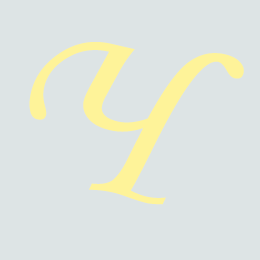
<style>
.page{position:relative;width:260px;height:260px;background:#dde4e5}
.page>*{position:absolute;margin:0}
.t1{font:250px "MonotypeCorsiva";letter-spacing:0.1em;color:#fef399;text-transform:uppercase}
</style>
<div class="page">
<p class="t1" style="left:29px;top:42px;width:215px;height:163px;rotate:13deg">ч</p>
</div>
